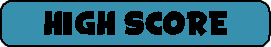
<style>
.page{position:relative;width:271px;height:47px;background:#3791ae}
.page>*{position:absolute;margin:0}
.t1{font:18px "SpaceComics";color:#000000}
</style>
<div class="page">
<p class="t1" style="left:44px;top:11px;width:183px;height:25px">HIGH SCORE</p>
</div>
